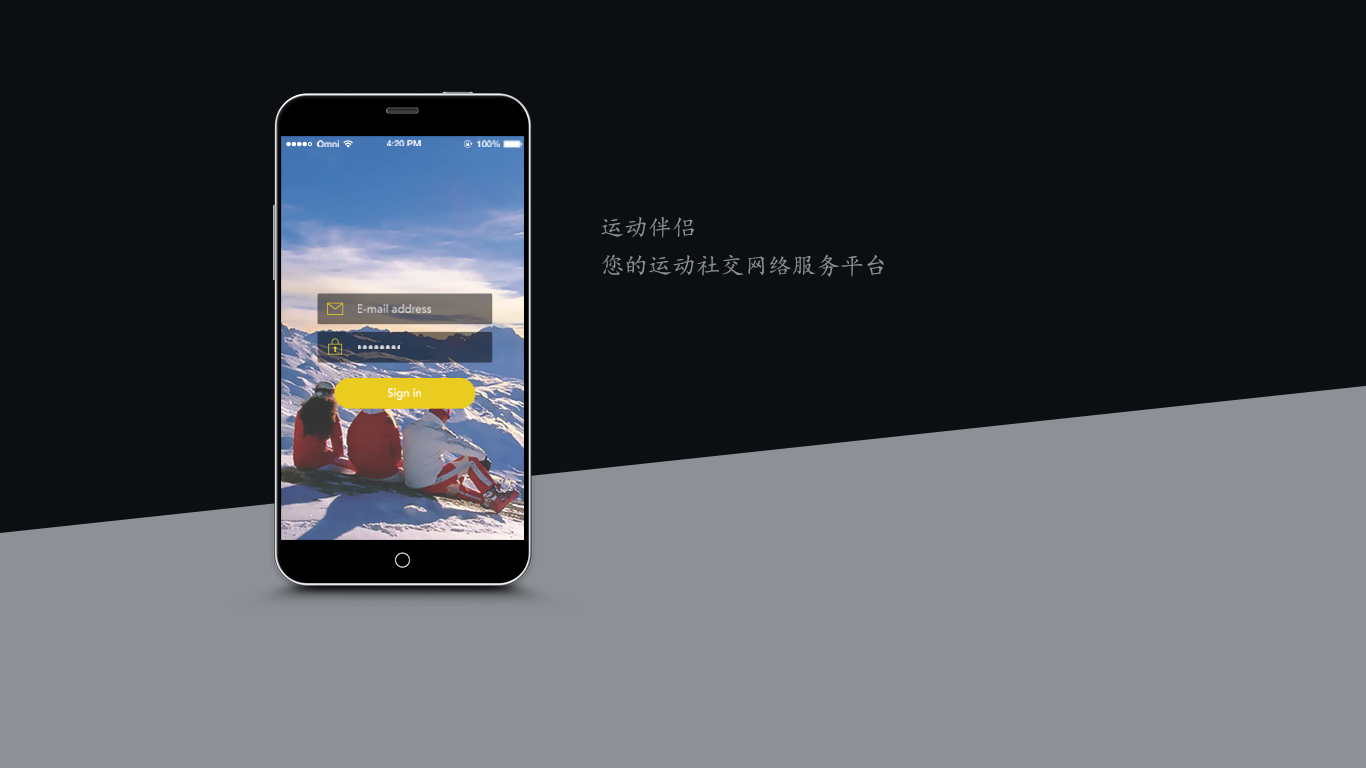
<style>
.page{position:relative;width:1366px;height:768px;background:#8d9096}
.page>*{position:absolute;margin:0}
.t1{font:9.2px "HelveticaNeue-Medium";color:#ffffff}
.t2{font:9.2px "HelveticaNeue-Medium"}
.t3{font:24px "KaiTi";color:#8d9096}
.t4{font:11.5px "Avenir-Roman";color:#dddbd9}
.t5{font:11.5px "Avenir-Roman";color:#d4d7dc}
.t6{font:11.5px "Avenir-Medium";color:#ffffff}
</style>
<div class="page">
<p class="t1" style="left:317px;top:140px;width:22px;height:7px">Omni</p>
<p class="t1" style="left:387px;top:140px;width:34px;height:6px">4:20 PM</p>
<p class="t2" style="left:477px;top:140px;width:23px;height:7px">100%</p>
<p class="t3" style="left:601px;top:217px;width:93px;height:21px">运动伴侣</p>
<p class="t3" style="left:602px;top:254px;width:282px;height:23px">您的运动社交网络服务平台</p>
<p class="t4" style="left:358px;top:304px;width:73px;height:9px">E-mail address</p>
<p class="t5" style="left:358px;top:345px;width:42px;height:4px">••••••••</p>
<p class="t6" style="left:388px;top:388px;width:33px;height:12px">Sign in</p>
</div>
